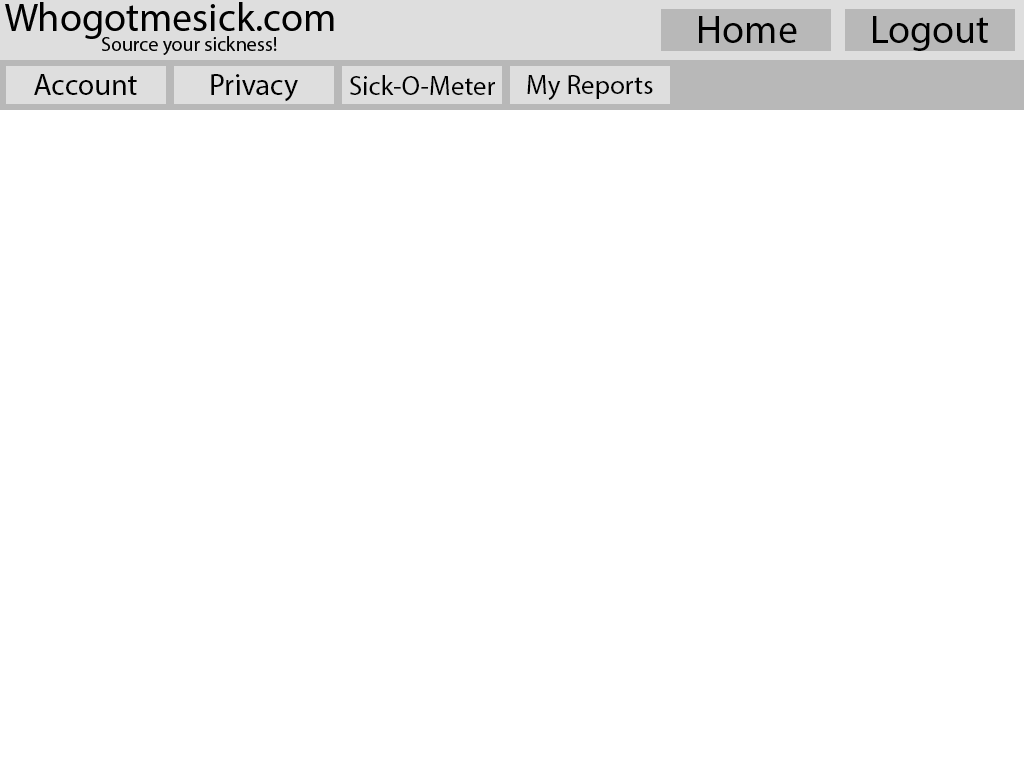
<style>
.page{position:relative;width:1024px;height:768px;background:#ffffff}
.page>*{position:absolute;margin:0}
.t1{font:40px "MyriadPro-Regular";color:#000000}
.t2{font:30px "MyriadPro-Regular";color:#000000}
.t3{font:27px "MyriadPro-Regular";color:#000000}
</style>
<div class="page">
<p class="t1" style="left:699px;top:16px;width:98px;height:27px">Home</p>
<p class="t2" style="left:34px;top:74px;width:103px;height:21px">Account</p>
<p class="t2" style="left:211px;top:74px;width:87px;height:28px">Privacy</p>
<p class="t3" style="left:350px;top:75px;width:145px;height:20px">Sick-O-Meter</p>
<p class="t3" style="left:527px;top:75px;width:126px;height:25px">My Reports</p>
</div>
